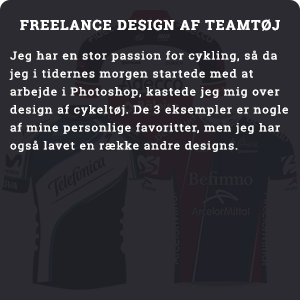
<style>
.page{position:relative;width:300px;height:300px;background:#2c2b31}
.page>*{position:absolute;margin:0}
.t1{font:14px "RobotoSlab-Bold";letter-spacing:0.075em;color:#ffffff}
.t2{font:11.1px/18px "RobotoSlab-Regular";letter-spacing:0.075em;color:#ffffff;scale:1.08 1}
</style>
<div class="page">
<p class="t1" style="left:20px;top:19px;width:260px;height:12px">FREELANCE DESIGN AF TEAMTØJ</p>
<p class="t2" style="left:9px;top:50px;width:279px;height:102px">Jeg har en stor passion for cykling, så da jeg i tidernes morgen startede med at arbejde i Photoshop, kastede jeg mig over design af cykeltøj. De 3 eksempler er nogle af mine personlige favoritter, men jeg har også lavet en række andre designs.</p>
</div>
